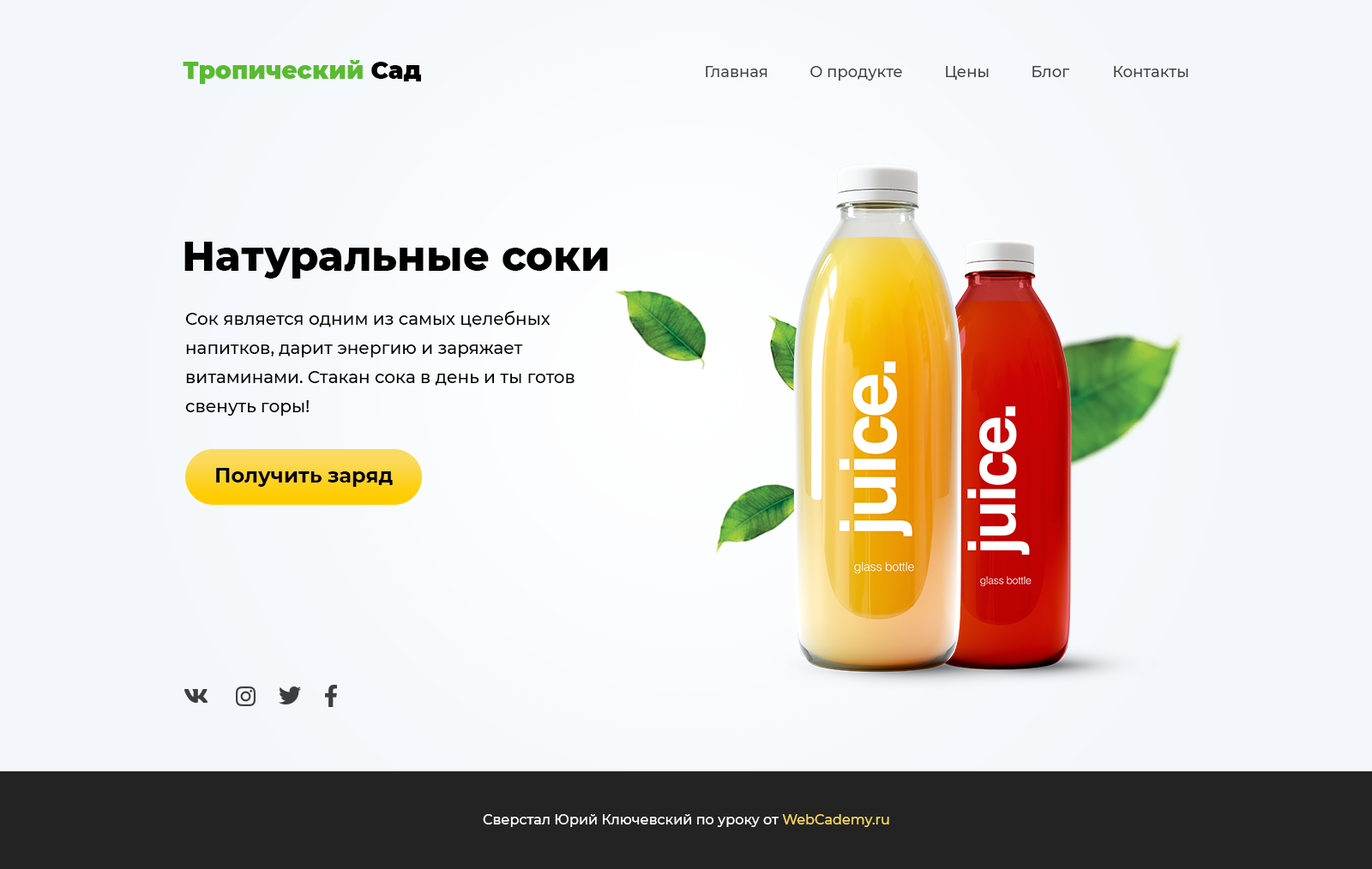
<style>
.page{position:relative;width:1372px;height:869px;background:#f3f7fb}
.page>*{position:absolute;margin:0}
.t1{font:24px "Montserrat-Black";color:#5abb33}
.t2{font:24px "Montserrat-Black";color:#000000}
.t3{font:15.4px "Montserrat-Medium";color:#3e3f3f}
.t4{font:15.4px "Montserrat-Medium";color:#3e3e3f}
.t5{font:15.4px "Montserrat-Medium";color:#3d3e3f}
.t6{font:41.2px "Montserrat-ExtraBold";color:#000000}
.t7{font:17.1px/29.1px "Montserrat-Medium";color:#000000}
.t8{font:20.6px "Montserrat-Bold";color:#000000}
.t9{font:13.7px "Montserrat-Medium";color:#ffffff}
.t10{font:13.7px "Montserrat-Medium";color:#fada5a}
</style>
<div class="page">
<p class="t1" style="left:183px;top:60px;width:238px;height:24px">Тропический<span class="t2"> Сад</span></p>
<p class="t3" style="left:706px;top:66px;width:61px;height:11px">Главная</p>
<p class="t3" style="left:810px;top:66px;width:92px;height:15px">О продукте</p>
<p class="t4" style="left:946px;top:66px;width:42px;height:14px">Цены</p>
<p class="t5" style="left:1032px;top:66px;width:38px;height:11px">Блог</p>
<p class="t5" style="left:1114px;top:66px;width:74px;height:11px">Контакты</p>
<p class="t6" style="left:184px;top:242px;width:424px;height:37px">Натуральные соки</p>
<p class="t7" style="left:185px;top:310px;width:389px;height:106px">Cок является одним из самых целебных напитков, дарит энергию и заряжает витаминами. Стакан сока в день и ты готов свенуть горы!</p>
<p class="t8" style="left:216px;top:468px;width:177px;height:19px">Получить заряд</p>
<p class="t9" style="left:483px;top:814px;width:406px;height:13px">Сверстал Юрий Ключевский по уроку от <span class="t10">WebCademy.ru</span></p>
</div>
